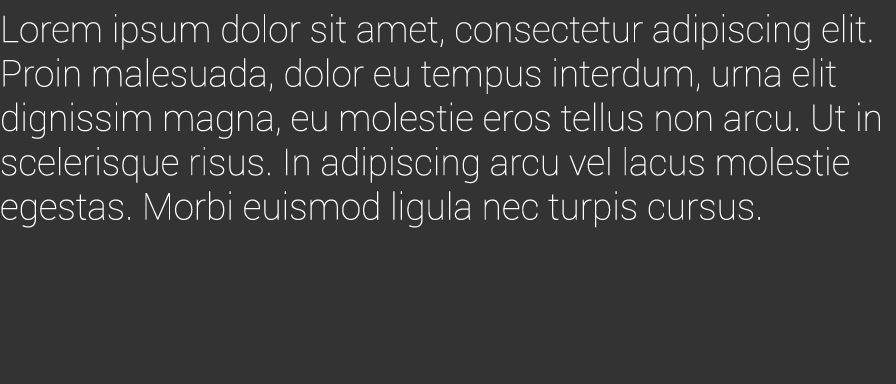
<style>
.page{position:relative;width:896px;height:384px;background:#333333}
.page>*{position:absolute;margin:0}
.t1{font:36.9px "Roboto-Thin";color:#ffffff}
</style>
<div class="page">
<p class="t1" style="left:1px;top:14px;width:879px;height:214px">Lorem ipsum dolor sit amet, consectetur adipiscing elit. Proin malesuada, dolor eu tempus interdum, urna elit dignissim magna, eu molestie eros tellus non arcu. Ut in scelerisque risus. In adipiscing arcu vel lacus molestie egestas. Morbi euismod ligula nec turpis cursus.</p>
</div>
